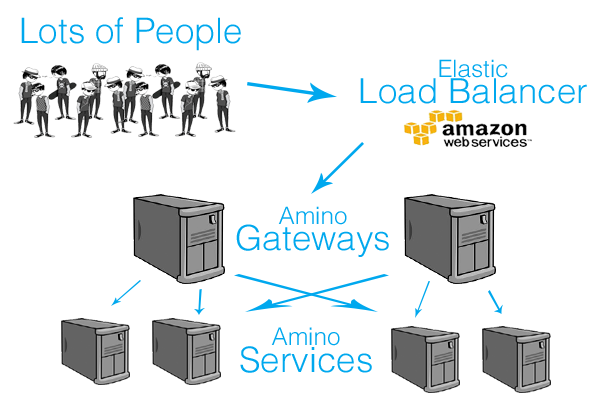
<style>
.page{position:relative;width:600px;height:400px;background:#ffffff}
.page>*{position:absolute;margin:0}
.t1{font:35px "Helvetica-Light";color:#00a8ee}
.t2{font:34.6px/26.7px "Helvetica-Light";color:#00a8ee}
.t3{font:24px/26.7px "Helvetica-Light";color:#00a8ee}
.t4{font:34.8px/26.9px "Helvetica-Light";color:#00a8ee}
.t5{font:24.2px/26.9px "Helvetica-Light";color:#00a8ee}
</style>
<div class="page">
<p class="t1" style="left:21px;top:17px;width:220px;height:34px">Lots of People</p>
<p class="t2" style="left:360px;top:59px;width:227px;height:45px;text-align:center"><span class="t3">Elastic<br></span>Load Balancer</p>
<p class="t2" style="left:236px;top:206px;width:153px;height:51px;text-align:center"><span class="t3">Amino<br></span>Gateways</p>
<p class="t4" style="left:240px;top:327px;width:132px;height:46px;text-align:center"><span class="t5">Amino<br></span>Services</p>
</div>
